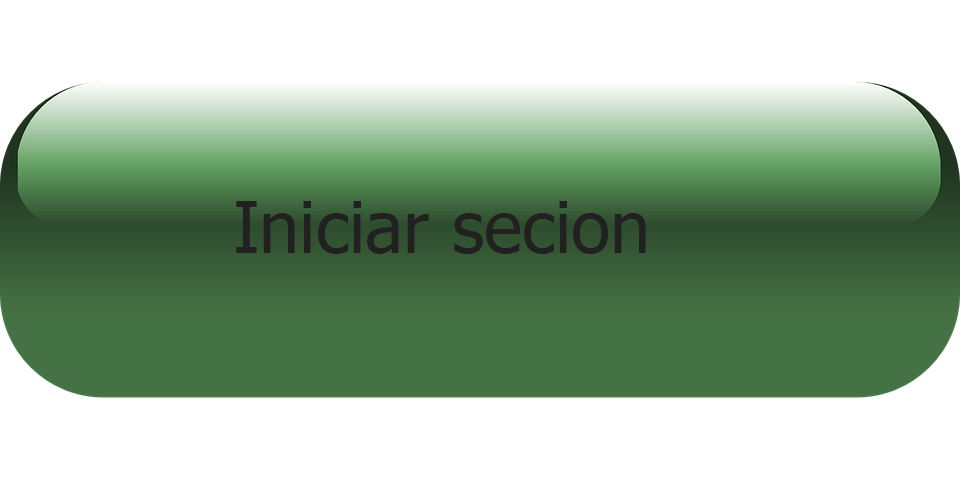
<style>
.page{position:relative;width:960px;height:480px;background:#ffffff}
.page>*{position:absolute;margin:0}
.t1{font:72px "Tahoma";color:#212121}
</style>
<div class="page">
<p class="t1" style="left:236px;top:201px;width:410px;height:53px">Iniciar secion</p>
</div>
